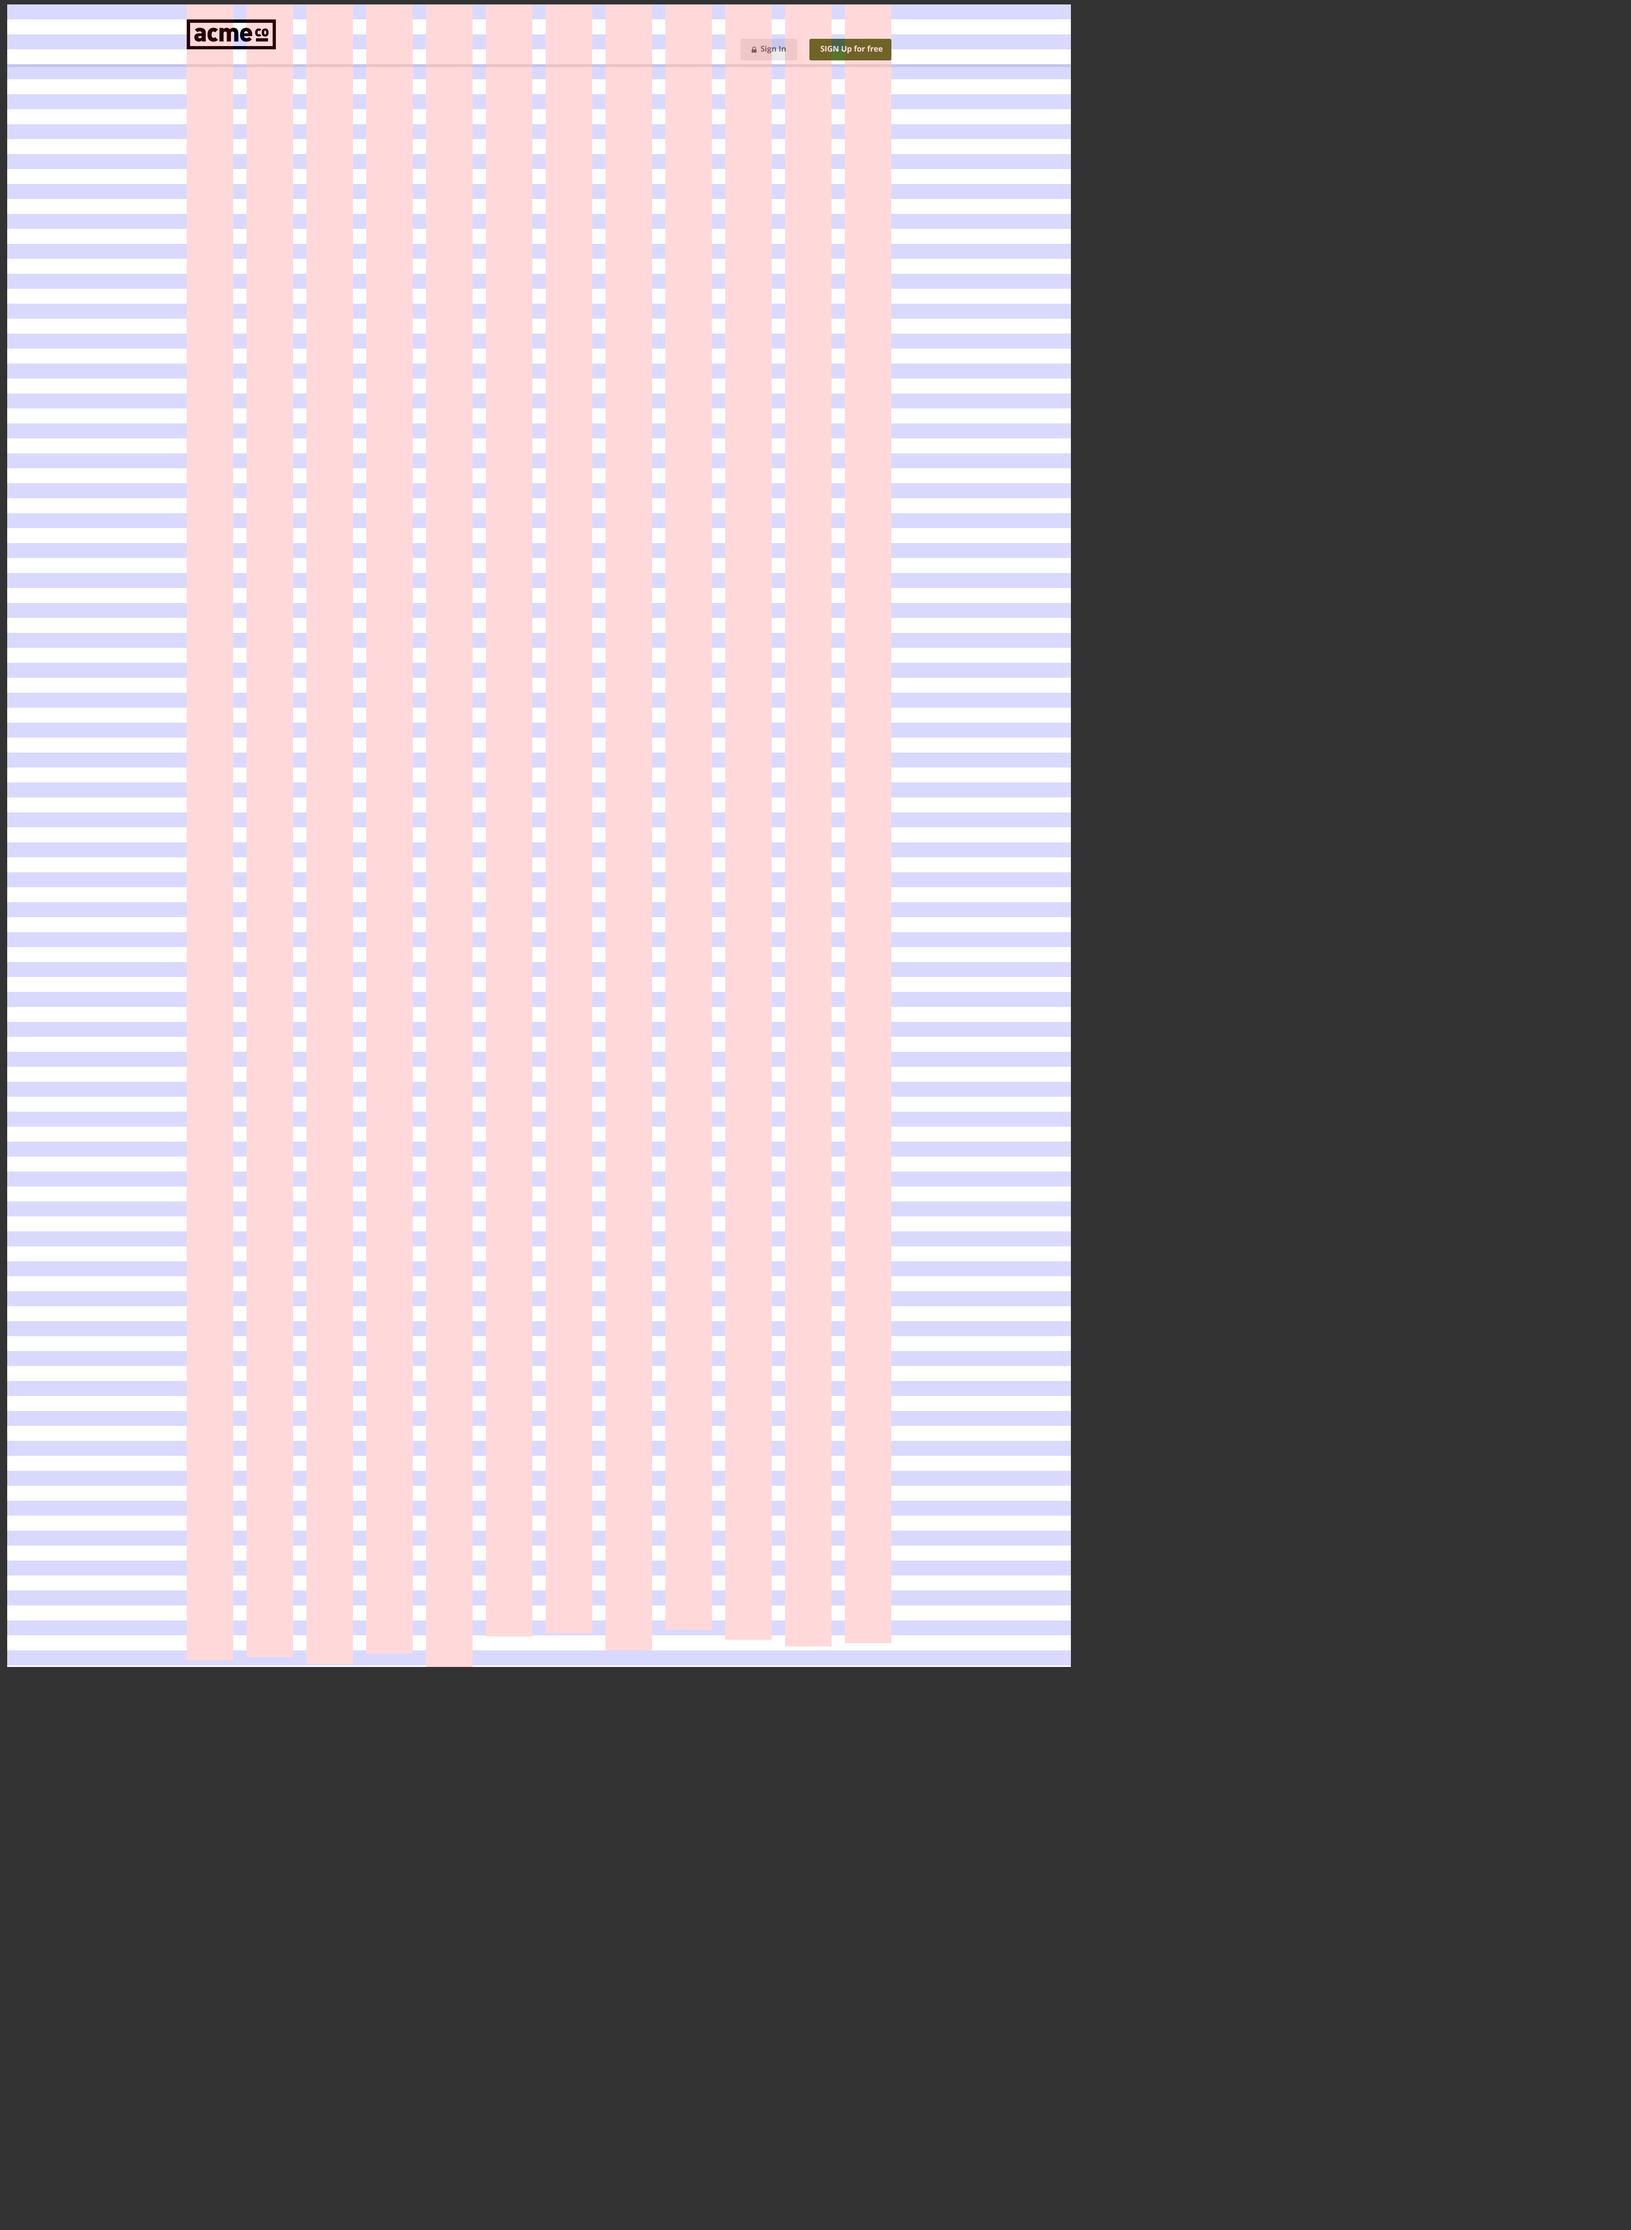
<style>
.page{position:relative;width:1631px;height:2230px;background:#333333}
.page>*{position:absolute;margin:0}
.t1{font:7.8px "OpenSans-Bold";color:#6e6e6e}
.t2{font:7.8px "OpenSans-Bold";color:#ffd9d9}
</style>
<div class="page">
<p class="t1" style="left:761px;top:45px;width:25px;height:9px">Sign In</p>
<p class="t2" style="left:821px;top:45px;width:62px;height:9px">SIGN Up for free</p>
</div>
